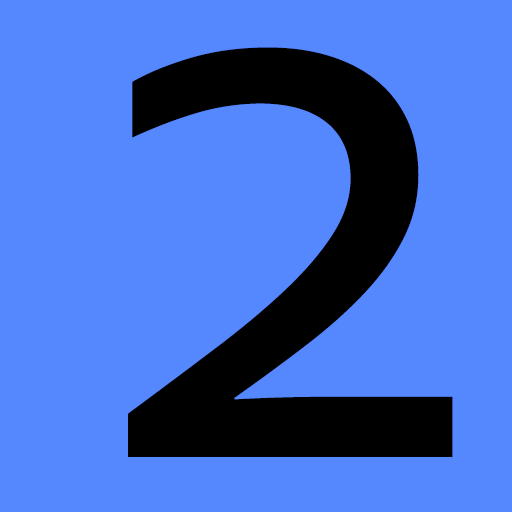
<style>
.page{position:relative;width:512px;height:512px;background:#5587ff}
.page>*{position:absolute;margin:0}
.t1{font:860px "Corbel";color:#000000}
</style>
<div class="page">
<p class="t1" style="left:128px;top:47px;width:325px;height:410px">2</p>
</div>
